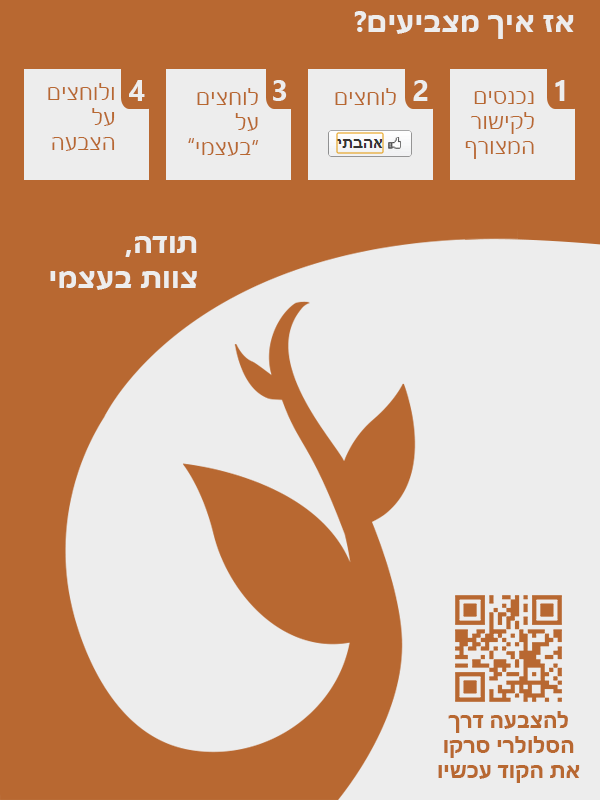
<style>
.page{position:relative;width:600px;height:800px;background:#ededed}
.page>*{position:absolute;margin:0}
.t1{font:29.2px "SegoeUI-Bold";color:#ededed}
.t2{font:20.8px "SegoeUI";color:#b86831}
.t3{font:20.8px "SegoeUI-Bold";color:#b86831}
</style>
<div class="page">
<p class="t1" style="left:354px;top:11px;width:220px;height:28px">?אז איך מצביעים</p>
<p class="t2" style="left:48px;top:83px;width:67px;height:68px;text-align:right">ולוחצים על הצבעה</p>
<p class="t1" style="left:129px;top:80px;width:16px;height:21px">4</p>
<p class="t2" style="left:196px;top:88px;width:63px;height:68px;text-align:right">לוחצים על “בעצמי</p>
<p class="t1" style="left:273px;top:80px;width:14px;height:21px">3</p>
<p class="t2" style="left:335px;top:88px;width:61px;height:17px">לוחצים</p>
<p class="t1" style="left:413px;top:80px;width:15px;height:21px">2</p>
<p class="t1" style="left:555px;top:80px;width:10px;height:21px">1</p>
<p class="t2" style="left:465px;top:91px;width:69px;height:68px;text-align:right">נכנסים          לקישור המצורף</p>
<p class="t2" style="left:188px;top:138px;width:6px;height:5px">“</p>
<p class="t1" style="left:50px;top:236px;width:147px;height:54px;text-align:right">,תודה <br>צוות בעצמי</p>
<p class="t3" style="left:438px;top:711px;width:142px;height:72px;text-align:center">להצבעה דרך הסלולרי סרקו את הקוד עכשיו</p>
</div>
